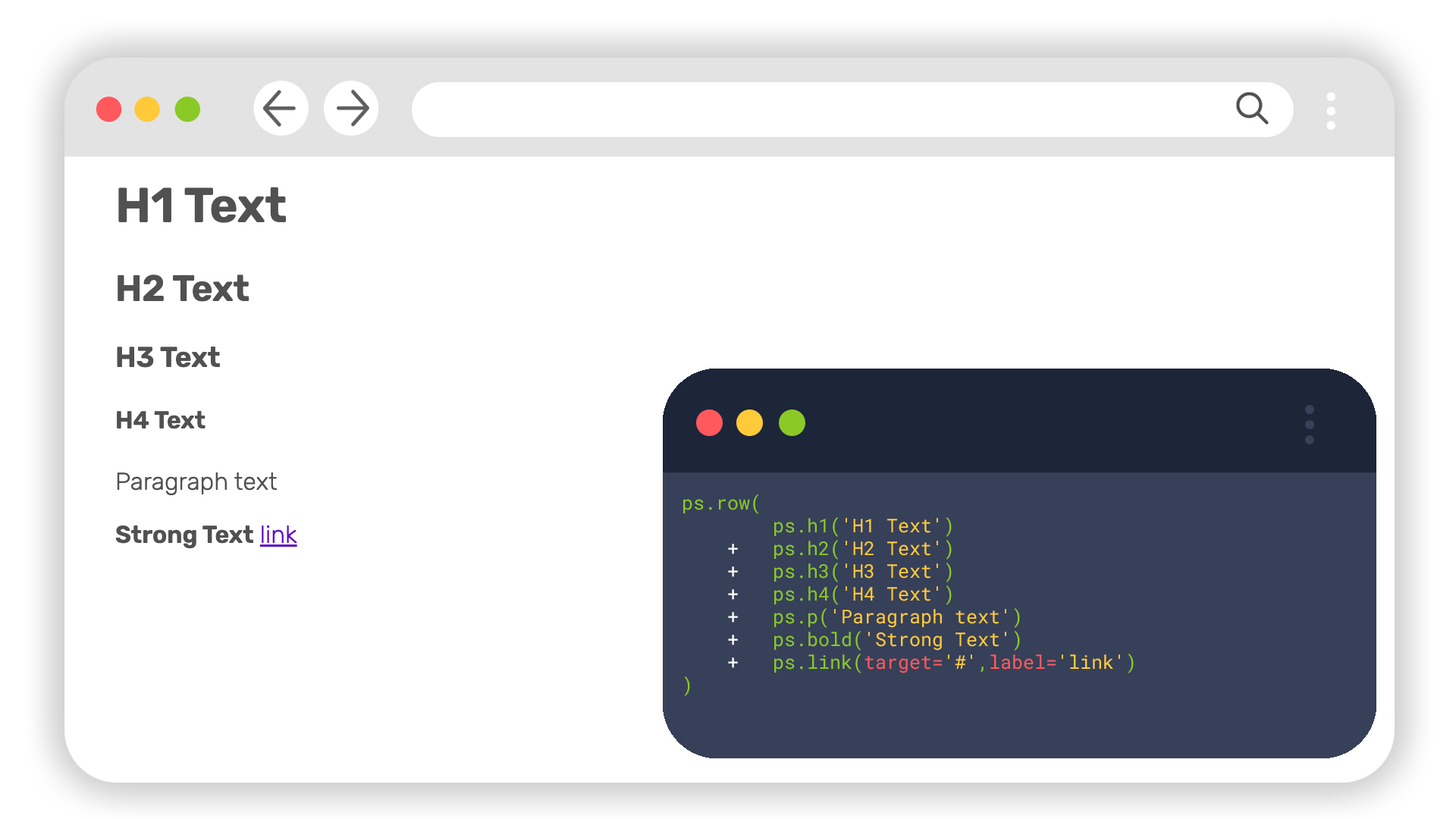
<style>
.page{position:relative;width:1456px;height:819px;background:#ffffff}
.page>*{position:absolute;margin:0}
.t1{font:19px "RobotoMono-Regular";color:#8ac926}
.t2{font:19px "RobotoMono-Regular";color:#ffca3a}
.t3{font:19px "RobotoMono-Regular";color:#ffffff}
.t4{font:19px "RobotoMono-Regular";color:#ff595e}
</style>
<div class="page">
<p class="t1" style="left:683px;top:494px;width:451px;height:202px">ps.row(<br>        ps.h1(<span class="t2">'H1 Text'</span>)<br>   <span class="t3"> +</span>   ps.h2(<span class="t2">'H2 Text'</span>)<br>    <span class="t3">+</span>   ps.h3(<span class="t2">'H3 Text'</span>)<br>    <span class="t3">+</span>   ps.h4(<span class="t2">'H4 Text'</span>)<br>    <span class="t3">+</span>   ps.p(<span class="t2">'Paragraph text'</span>)<br>    <span class="t3">+</span>   ps.bold(<span class="t2">'Strong Text'</span>)<br>    <span class="t3">+</span>   ps.link(<span class="t4">target=</span><span class="t2">'#'</span>,<span class="t4">label=</span><span class="t2">'link'</span>)<br>)</p>
</div>
